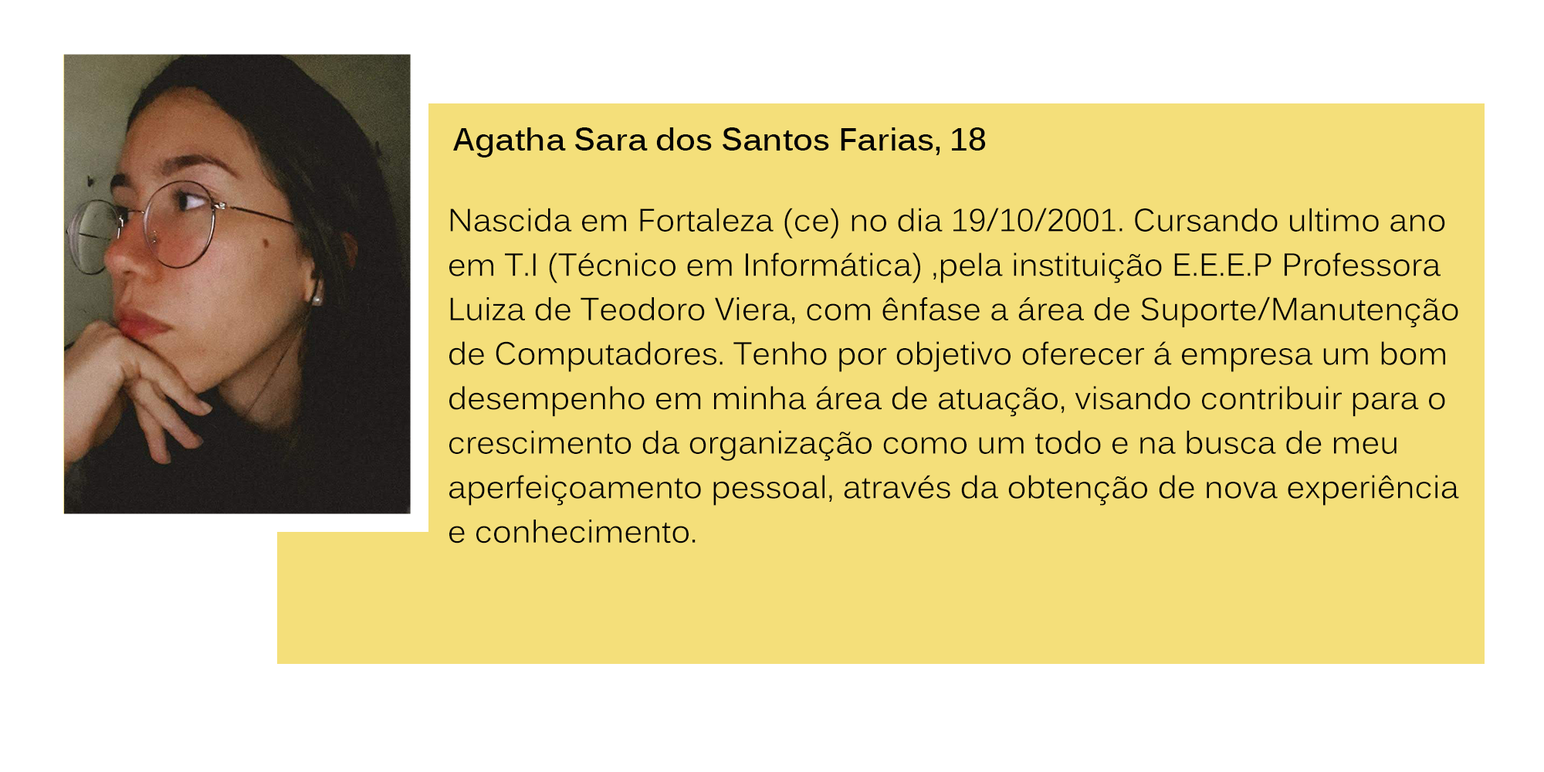
<style>
.page{position:relative;width:1544px;height:772px;background:#f4df7a}
.page>*{position:absolute;margin:0}
.t1{font:31.5px "Kalinga-Bold";color:#040404}
.t2{font:31.5px "Kalinga";color:#040404}
</style>
<div class="page">
<p class="t1" style="left:453px;top:127px;width:533px;height:31px">Agatha Sara dos Santos Farias, 18</p>
<p class="t2" style="left:449px;top:208px;width:1010px;height:336px">Nascida em Fortaleza (ce) no dia 19/10/2001. Cursando ultimo ano <br>em T.I (Técnico em Informática) ,pela instituição E.E.E.P Professora<br>Luiza de Teodoro Viera, com ênfase a área de Suporte/Manutenção<br>de Computadores. Tenho por objetivo oferecer á empresa um bom<br>desempenho em minha área de atuação, visando contribuir para o<br>crescimento da organização como um todo e na busca de meu <br>aperfeiçoamento pessoal, através da obtenção de nova experiência<br>e conhecimento.</p>
</div>
